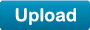
<style>
.page{position:relative;width:90px;height:30px}
.page>*{position:absolute;margin:0}
.t1{font:18px "ArialRoundedMTBold";color:#ffffff}
</style>
<div class="page">
<p class="t1" style="left:15px;top:8px;width:61px;height:18px">Upload</p>
</div>
